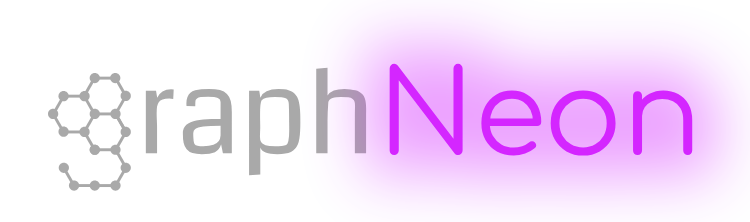
<style>
.page{position:relative;width:750px;height:222px;background:#ffffff}
.page>*{position:absolute;margin:0}
.t1{font:116.7px "Comfortaa-Regular";color:#d426ff}
.t2{font:116.7px "Coda-Regular";color:#a9a9a9}
</style>
<div class="page">
<p class="t1" style="left:389px;top:63px;width:304px;height:93px">Neon</p>
<p class="t2" style="left:145px;top:67px;width:222px;height:109px">raph</p>
</div>
